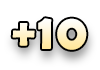
<style>
.page{position:relative;width:100px;height:70px;background:#ffffff}
.page>*{position:absolute;margin:0}
.t1{font:50px "BerlinSansFBDemi-Bold";letter-spacing:0.05em}
</style>
<div class="page">
<p class="t1" style="left:12px;top:18px;width:75px;height:32px">+10</p>
</div>
